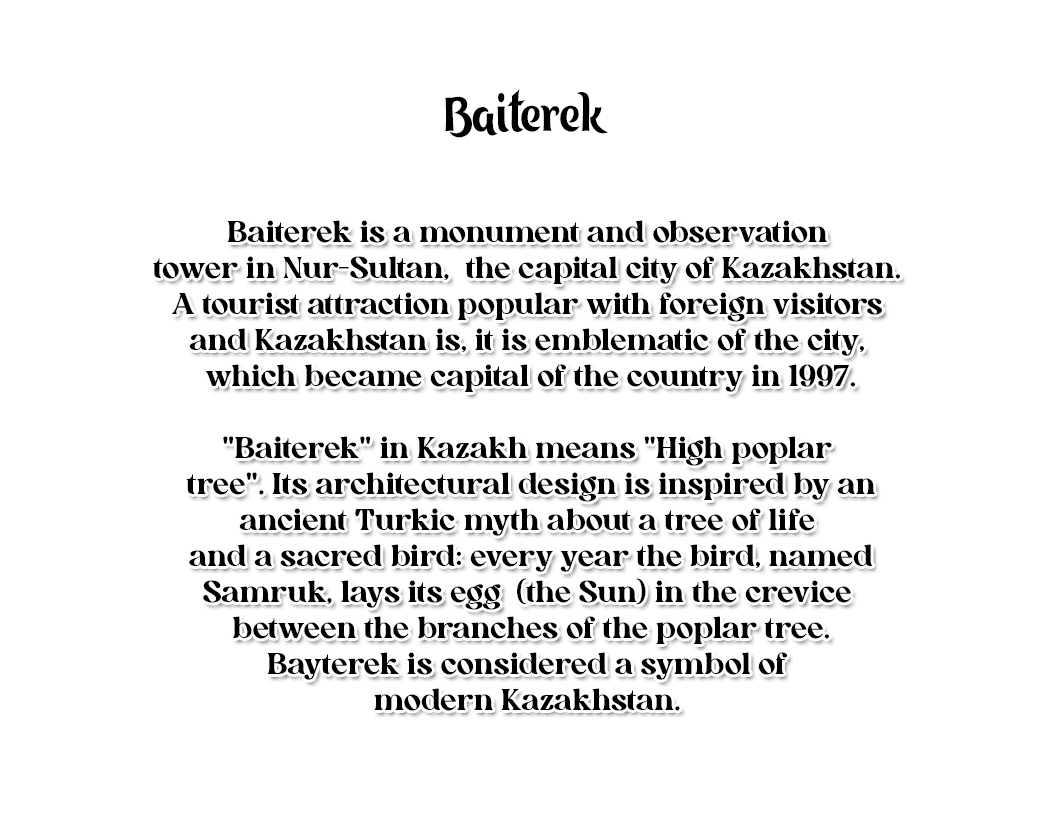
<style>
.page{position:relative;width:1043px;height:834px;background:#ffffff}
.page>*{position:absolute;margin:0}
.t1{font:48px "KZ_Tangak-Regular";color:#000000}
.t2{font:30px "AllenoireFreePersonal-Regular";color:#000000}
</style>
<div class="page">
<p class="t1" style="left:445px;top:89px;width:163px;height:49px">Baiterek</p>
<p class="t2" style="left:153px;top:220px;width:747px;height:491px;text-align:center">Baiterek is a monument and observation<br>tower in Nur-Sultan,  the capital city of Kazakhstan.<br>A tourist attraction popular with foreign visitors<br>and Kazakhstan is, it is emblematic of the city,<br> which became capital of the country in 1997.<br><br>"Baiterek" in Kazakh means "High poplar<br> tree". Its architectural design is inspired by an<br>ancient Turkic myth about a tree of life<br> and a sacred bird: every year the bird, named<br>Samruk, lays its egg  (the Sun) in the crevice<br> between the branches of the poplar tree.<br>Bayterek is considered a symbol of<br>modern Kazakhstan.</p>
</div>
